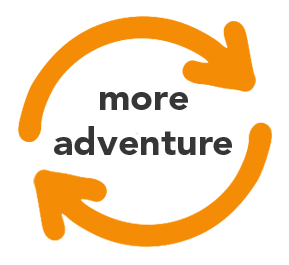
<style>
.page{position:relative;width:289px;height:265px;background:#ffffff}
.page>*{position:absolute;margin:0}
.t1{font:37.5px "AvenirLTStd-Black";color:#363636}
</style>
<div class="page">
<p class="t1" style="left:54px;top:92px;width:178px;height:63px;text-align:center">more<br>adventure</p>
</div>
